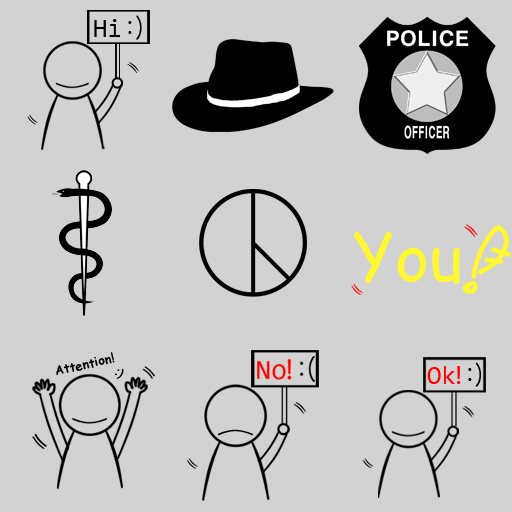
<style>
.page{position:relative;width:512px;height:512px;background:#d2d2d2}
.page>*{position:absolute;margin:0}
.t1{font:26.3px "Consolas";color:#000000}
.t2{font:26.3px "Gulim";color:#000000}
.t3{font:65px "ComicSansMS";color:#fff731}
.t4{font:12.1px "ComicSansMS";color:#000000;font-weight:bold}
.t5{font:26.1px "Consolas";letter-spacing:-0.16em;color:#ff0000}
.t6{font:26.1px "Consolas";color:#ff0000}
.t7{font:26.1px "Gulim";color:#000000}
.t8{font:12.1px "Gulim";color:#000000;font-weight:bold}
</style>
<div class="page">
<p class="t1" style="left:94px;top:15px;width:48px;height:25px">Hi <span class="t2">:)</span></p>
<p class="t3" style="left:353px;top:232px;width:107px;height:52px">You</p>
<p class="t4" style="left:56px;top:352px;width:59px;height:23px;rotate:-13deg">Attention!</p>
<p class="t5" style="left:427px;top:362px;width:55px;height:25px"><span class="t6">O</span>k! <span class="t7">:)</span></p>
<p class="t8" style="left:114px;top:368px;width:10px;height:11px;rotate:30deg">:)</p>
</div>
